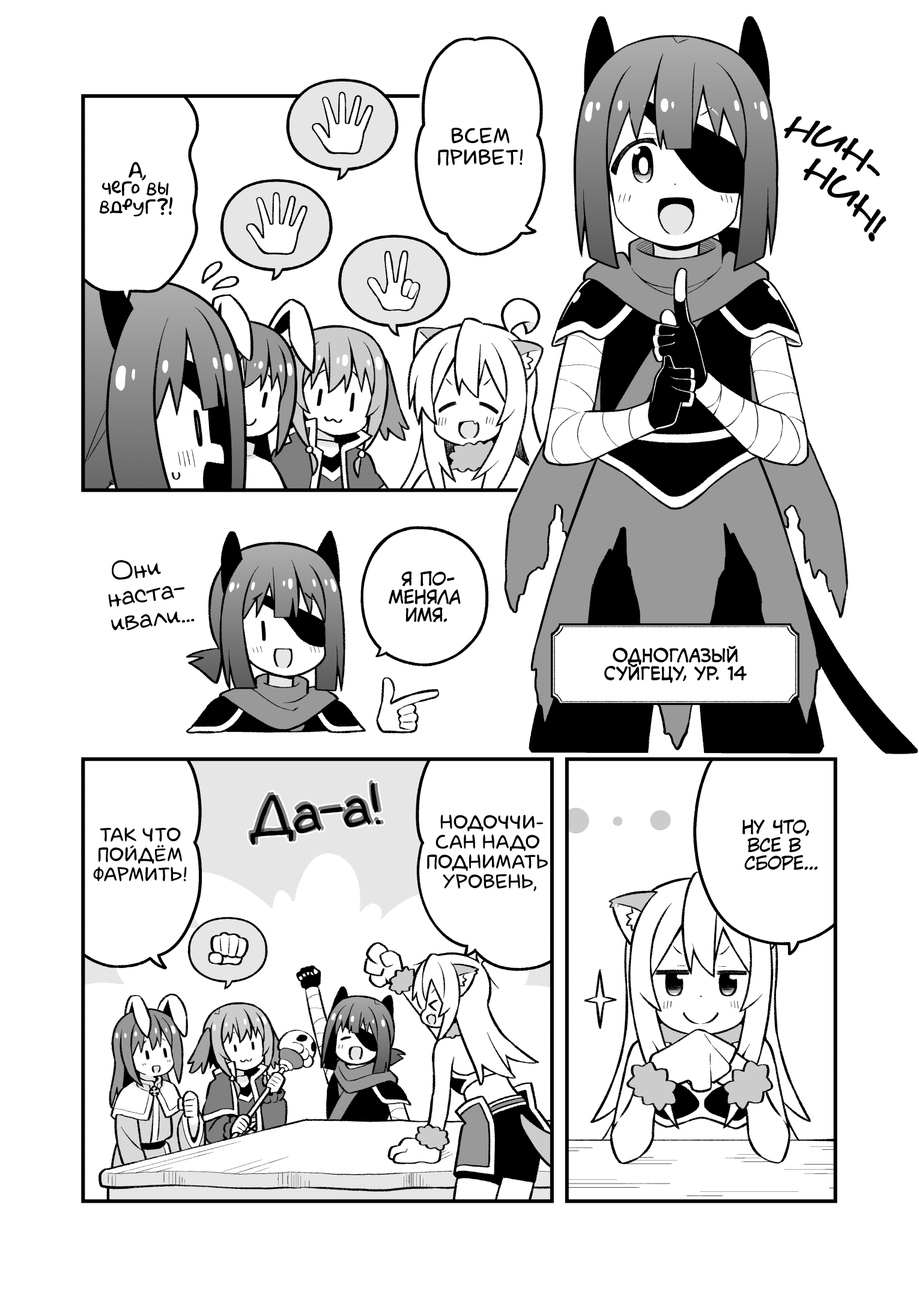
<style>
.page{position:relative;width:919px;height:1297px;background:#ffffff}
.page>*{position:absolute;margin:0}
.t1{font:36px "DSNote";color:#000000;scale:1.2 1}
.t2{font:21.6px "laCartoonerie";color:#000000;text-transform:uppercase}
.t3{font:18px "AkbarPlain";color:#000000}
.t4{font:25.2px "v_Augie";color:#000000}
.t5{font:18px "KuraiVoice2";color:#000000;text-transform:uppercase}
.t6{font:18px "v_CCMonologous";color:#000000;text-transform:uppercase}
.t7{font:54.1px "v_Augie"}
.t8{font:54.1px "v_Augie";color:#000000}
.t9{font:19.8px "laCartoonerie";color:#000000;text-transform:uppercase}
</style>
<div class="page">
<p class="t1" style="left:784px;top:117px;width:102px;height:124px;text-align:center;rotate:34deg">Нин-<br>нин!</p>
<p class="t2" style="left:438px;top:127px;width:85px;height:39px;text-align:center">Всем<br>привет!</p>
<p class="t3" style="left:99px;top:162px;width:74px;height:55px;text-align:center">А,<br>чего вы<br>вдруг?!</p>
<p class="t4" style="left:108px;top:560px;width:87px;height:71px;text-align:center;rotate:-7deg">Они<br>наста-<br>ивали...</p>
<p class="t5" style="left:389px;top:571px;width:72px;height:51px;text-align:center">Я по-<br>меняла<br>имя.</p>
<p class="t6" style="left:604px;top:646px;width:143px;height:38px;text-align:center">Одноглазый<br>Суйгецу, ур. 14</p>
<p class="t7" style="left:248px;top:780px;width:131px;height:63px;rotate:-7deg">Да-а!</p>
<p class="t8" style="left:250px;top:783px;width:131px;height:63px;rotate:-7deg">Да-а!</p>
<p class="t7" style="left:253px;top:783px;width:131px;height:63px;rotate:-7deg">Да-а!</p>
<p class="t9" style="left:427px;top:815px;width:121px;height:77px;text-align:center">Нодоччи-<br>сан надо<br>поднимать<br>уровень,</p>
<p class="t5" style="left:742px;top:819px;width:76px;height:52px;text-align:center">Ну что,<br>все в<br>сборе...</p>
<p class="t9" style="left:93px;top:828px;width:94px;height:54px;text-align:center">Так что<br>пойдём<br>фармить!</p>
</div>
